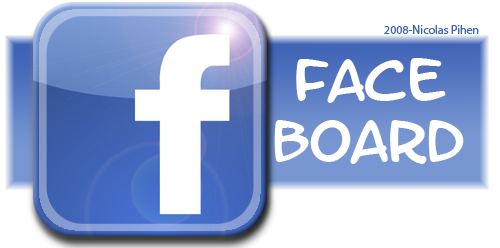
<style>
.page{position:relative;width:500px;height:248px;background:#ffffff}
.page>*{position:absolute;margin:0}
.t1{font:12px "MyriadPro-Regular";color:#3f63b6}
.t2{font:50.6px "LetterOMatic";color:#ffffff;scale:1.06 1}
</style>
<div class="page">
<p class="t1" style="left:384px;top:25px;width:95px;height:9px">2008-Nicolas Pihen</p>
<p class="t2" style="left:274px;top:58px;width:190px;height:106px;text-align:center">Face<br>Board</p>
</div>
